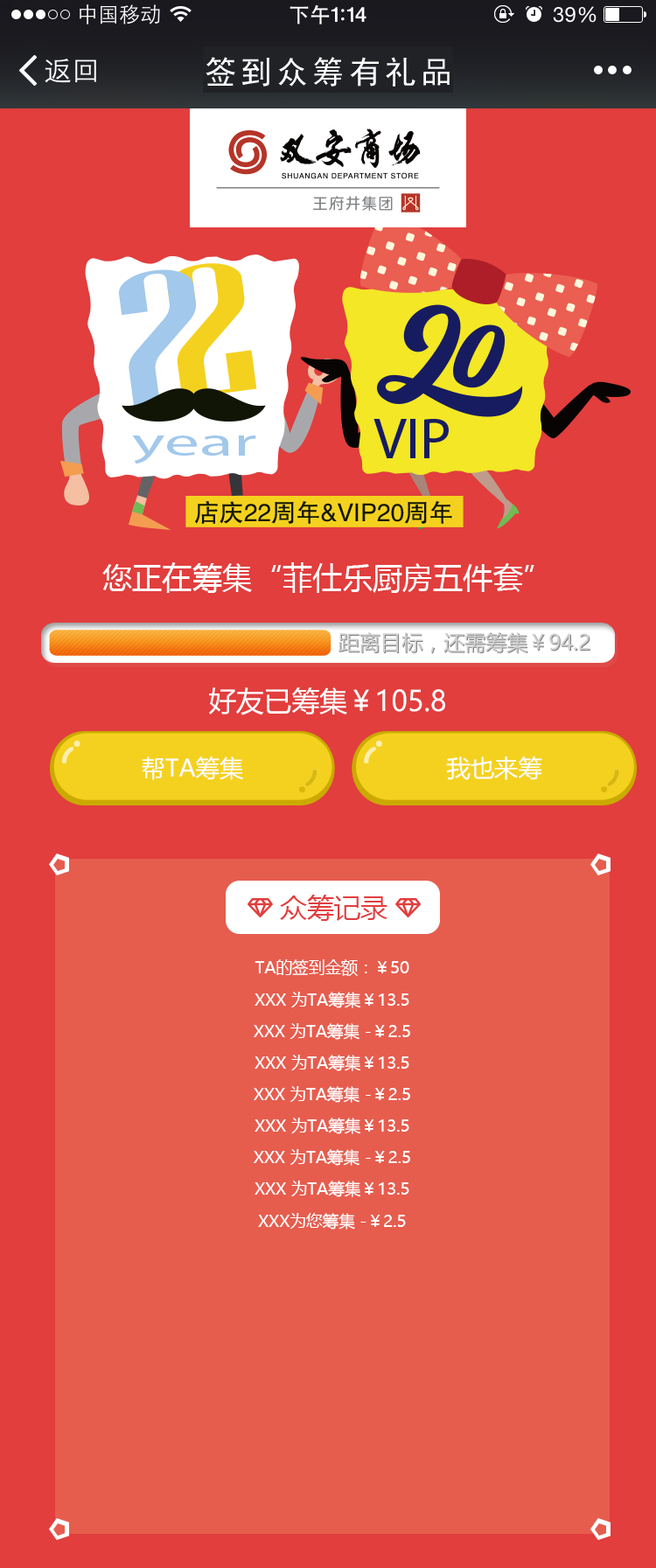
<style>
.page{position:relative;width:656px;height:1568px;background:#e65d4e}
.page>*{position:absolute;margin:0}
.t1{font:30.3px "MicrosoftYaHei";color:#ffffff}
.t2{font:28px "MicrosoftYaHei";color:#ffffff}
.t3{font:23.8px "MicrosoftYaHei";color:#ffffff}
.t4{font:26.8px "MicrosoftYaHei";color:#e13e3d}
.t5{font:16.3px/31.6px "MicrosoftYaHei";color:#ffffff}
</style>
<div class="page">
<p class="t1" style="left:102px;top:562px;width:432px;height:31px">您正在筹集“菲仕乐厨房五件套”</p>
<p class="t2" style="left:209px;top:687px;width:236px;height:28px">好友已筹集￥105.8</p>
<p class="t3" style="left:142px;top:756px;width:101px;height:24px">帮TA筹集</p>
<p class="t3" style="left:446px;top:756px;width:96px;height:24px">我也来筹</p>
<p class="t4" style="left:280px;top:895px;width:107px;height:26px">众筹记录</p>
<p class="t5" style="left:254px;top:959px;width:156px;height:271px;text-align:center">TA的签到金额：￥50<br>XXX 为TA筹集￥13.5<br>XXX 为TA筹集 -￥2.5<br>XXX 为TA筹集￥13.5<br>XXX 为TA筹集 -￥2.5<br>XXX 为TA筹集￥13.5<br>XXX 为TA筹集 -￥2.5<br>XXX 为TA筹集￥13.5<br>XXX为您筹集 -￥2.5</p>
</div>
